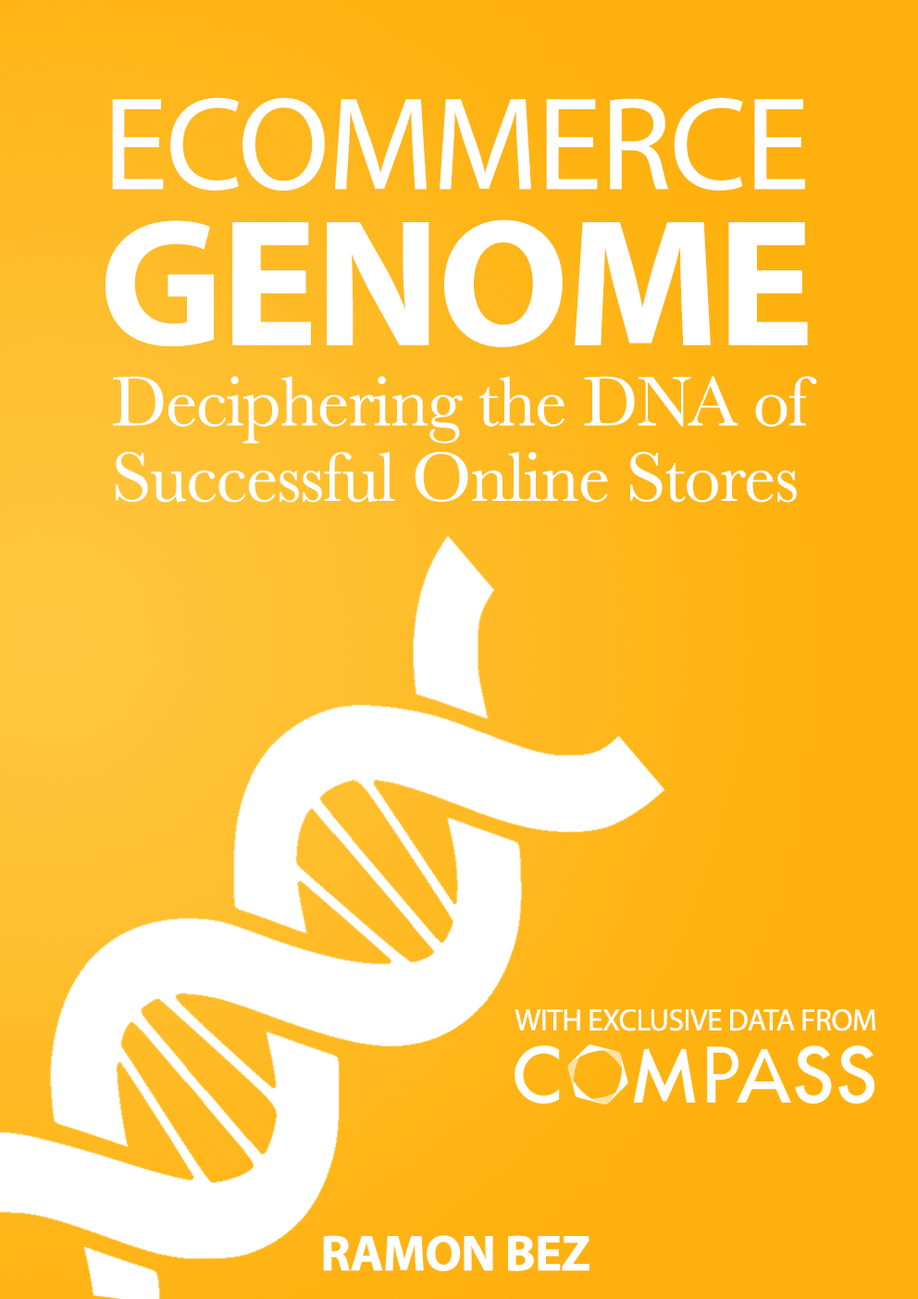
<style>
.page{position:relative;width:918px;height:1299px}
.page>*{position:absolute;margin:0}
.t1{font:132.7px "MyriadPro-Regular";letter-spacing:-0.015em;color:#ffffff}
.t2{font:182px "MyriadPro-Bold";letter-spacing:-0.015em;color:#ffffff}
.t3{font:72.5px/75.6px "Baskerville";letter-spacing:-0.015em;color:#ffffff}
.t4{font:30.9px "MyriadPro-Regular";letter-spacing:-0.015em;color:#ffffff}
.t5{font:50.9px "MyriadPro-Bold";letter-spacing:-0.015em;color:#ffffff}
</style>
<div class="page">
<p class="t1" style="left:112px;top:97px;width:693px;height:94px">ECOMMERCE</p>
<p class="t2" style="left:106px;top:219px;width:702px;height:128px">GENOME</p>
<p class="t3" style="left:113px;top:376px;width:704px;height:127px">Deciphering the DNA of<br>Successful Online Stores</p>
<p class="t4" style="left:515px;top:1009px;width:361px;height:22px">WITH EXCLUSIVE DATA FROM</p>
<p class="t5" style="left:323px;top:1235px;width:267px;height:36px">RAMON BEZ</p>
</div>
